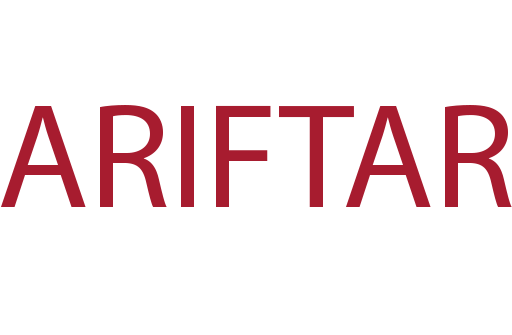
<style>
.page{position:relative;width:512px;height:335px;background:#ffffff}
.page>*{position:absolute;margin:0}
.t1{font:150px "MyriadPro-Regular";color:#a71c2f}
</style>
<div class="page">
<p class="t1" style="left:1px;top:105px;width:511px;height:102px">ARIFTAR</p>
</div>
